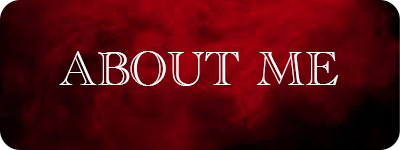
<style>
.page{position:relative;width:400px;height:150px}
.page>*{position:absolute;margin:0}
.t1{font:50px "AcademyEngravedLetPlain";color:#ffffff}
</style>
<div class="page">
<p class="t1" style="left:59px;top:51px;width:280px;height:35px">ABOUT ME</p>
</div>
